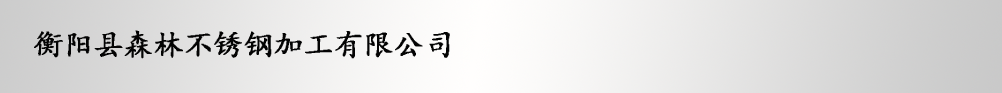
<style>
.page{position:relative;width:1002px;height:93px}
.page>*{position:absolute;margin:0}
.t1{font:30px "¿¬Ìå";color:#030303;font-weight:bold}
</style>
<div class="page">
<p class="t1" style="left:34px;top:30px;width:416px;height:29px">衡阳县森林不锈钢加工有限公司</p>
</div>
